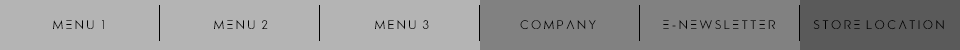
<style>
.page{position:relative;width:960px;height:50px;background:#b4b4b4}
.page>*{position:absolute;margin:0}
.t1{font:12px "Pasajero";color:#010101}
.t2{font:12px "Pasajero";color:#000000}
</style>
<div class="page">
<p class="t1" style="left:53px;top:20px;width:51px;height:10px">M E N U  1</p>
<p class="t1" style="left:214px;top:20px;width:54px;height:10px">M E N U  2</p>
<p class="t2" style="left:375px;top:20px;width:54px;height:10px">m e n u  3</p>
<p class="t2" style="left:520px;top:20px;width:76px;height:10px">C O M P A N Y</p>
<p class="t2" style="left:663px;top:20px;width:112px;height:10px">E - N E W S L E T T E R</p>
<p class="t2" style="left:813px;top:20px;width:131px;height:10px">S T O R E  L O C A T I O N</p>
</div>
